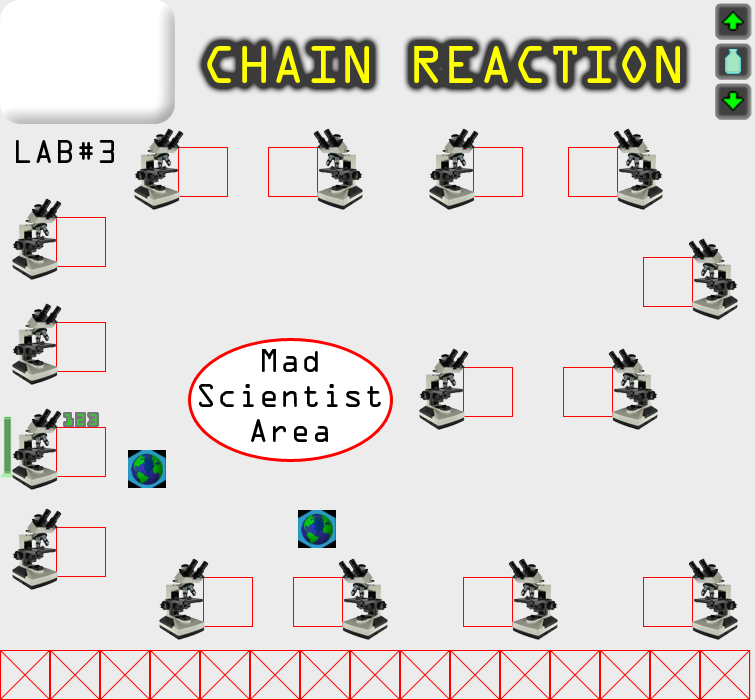
<style>
.page{position:relative;width:755px;height:700px;background:#ececec}
.page>*{position:absolute;margin:0}
.t1{font:29.2px "OCRAStd";color:#000000}
</style>
<div class="page">
<p class="t1" style="left:16px;top:140px;width:98px;height:23px">LAB#3</p>
<p class="t1" style="left:199px;top:349px;width:182px;height:93px;text-align:center">Mad<br>Scientist<br>Area</p>
</div>
